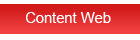
<style>
.page{position:relative;width:140px;height:40px;background:#ffffff}
.page>*{position:absolute;margin:0}
.t1{font:14.7px "ArialMT";color:#ffffff}
</style>
<div class="page">
<p class="t1" style="left:26px;top:12px;width:85px;height:11px">Content Web</p>
</div>
